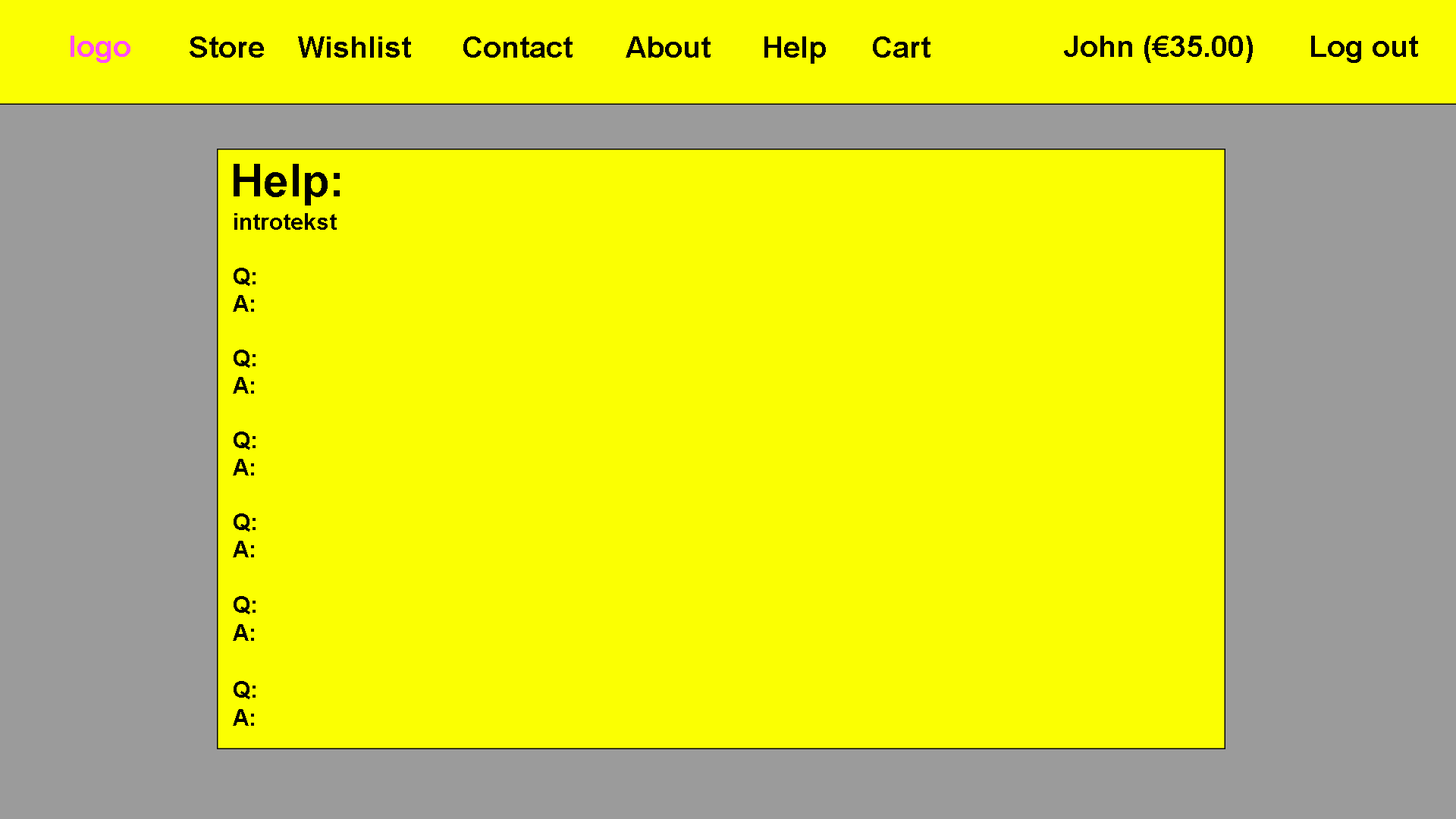
<style>
.page{position:relative;width:1456px;height:819px;background:#fbff02}
.page>*{position:absolute;margin:0}
.t1{font:29.6px "Arial-BoldMT";color:#ff4cff}
.t2{font:29.6px "Arial-BoldMT";color:#000000}
.t3{font:29.6px "Arial-BoldMT";color:#010101}
.t4{font:45.5px "Arial-BoldMT";color:#000000}
.t5{font:22.7px "Arial-BoldMT";color:#000000}
.t6{font:23.5px "Arial-BoldMT";color:#000000}
</style>
<div class="page">
<p class="t1" style="left:71px;top:36px;width:59px;height:27px">logo</p>
<p class="t2" style="left:190px;top:36px;width:740px;height:28px">Store  Wishlist  Contact  About  Help  Cart</p>
<p class="t3" style="left:1064px;top:36px;width:354px;height:27px">John (€35.00)  Log out</p>
<p class="t4" style="left:234px;top:164px;width:106px;height:42px">Help:</p>
<p class="t5" style="left:234px;top:213px;width:103px;height:17px">introtekst</p>
<p class="t5" style="left:233px;top:268px;width:23px;height:458px">Q:<br>A:<br><br>Q:<br>A:<br><br>Q:<br>A:<br><br>Q:<br>A:<br><br>Q<span class="t6">:<br>A:<br><br>Q:<br>A:</span></p>
</div>
